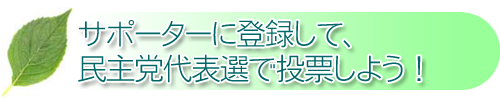
<style>
.page{position:relative;width:500px;height:100px;background:#ffffff}
.page>*{position:absolute;margin:0}
.t1{font:30px "NfMotoyaCedar-W1-90mskp-RKSJ-H";letter-spacing:-0.05em;color:#006666}
</style>
<div class="page">
<p class="t1" style="left:79px;top:19px;width:272px;height:29px">サポーターに登録して、</p>
<p class="t1" style="left:78px;top:54px;width:343px;height:29px">民主党代表選で投票しよう！</p>
</div>
